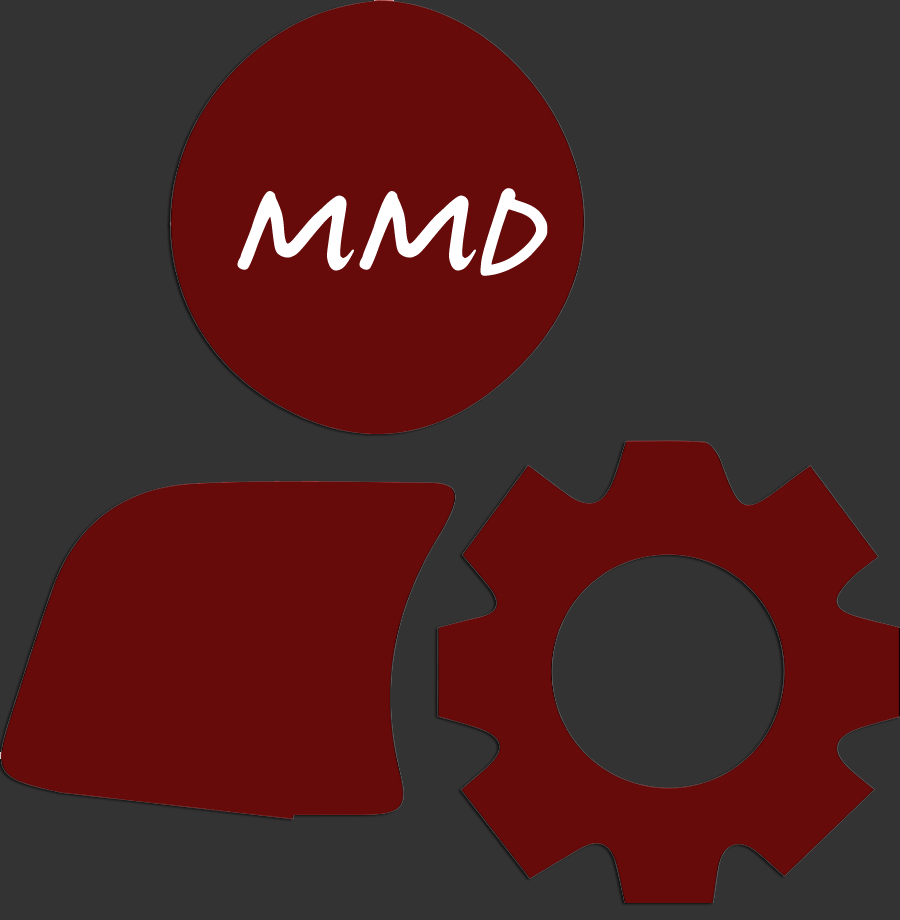
<style>
.page{position:relative;width:900px;height:920px;background:#333333}
.page>*{position:absolute;margin:0}
.t1{font:173.3px "JamesFajardo";letter-spacing:-0.1em;color:#ffffff;font-weight:bold}
</style>
<div class="page">
<p class="t1" style="left:237px;top:188px;width:311px;height:88px">M M D</p>
</div>
